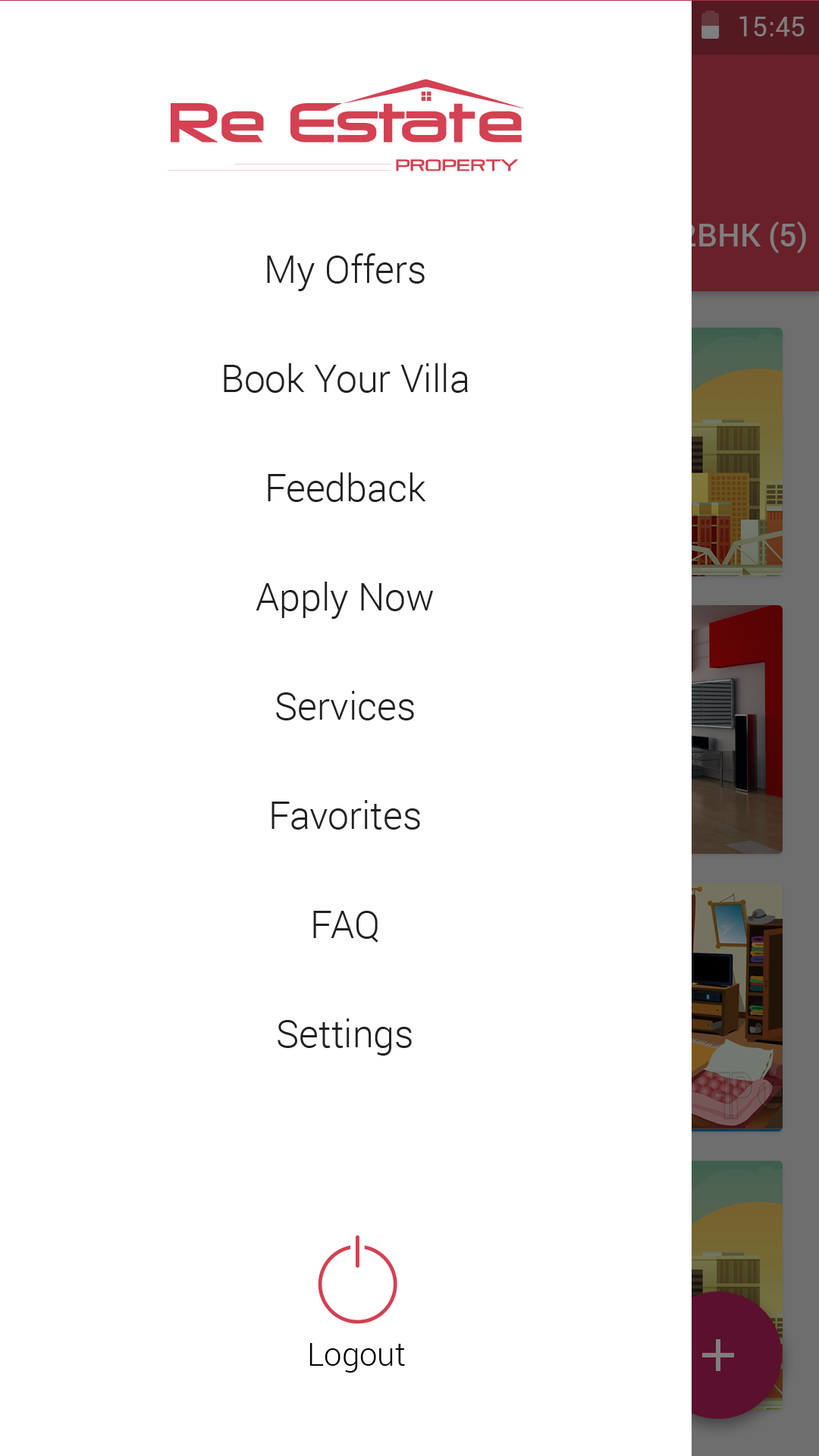
<style>
.page{position:relative;width:819px;height:1456px;background:#ffffff}
.page>*{position:absolute;margin:0}
.t1{font:37.9px/109.2px "Roboto-Light";color:#212121}
.t2{font:31.8px "Roboto-Light";color:#000000}
</style>
<div class="page">
<p class="t1" style="left:224px;top:253px;width:244px;height:803px;text-align:center">My Offers<br>Book Your Villa<br>Feedback<br>Apply Now<br>Services<br>Favorites<br>FAQ<br>Settings</p>
<p class="t2" style="left:309px;top:1343px;width:96px;height:30px">Logout</p>
</div>
